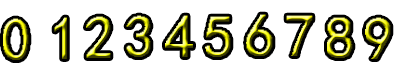
<style>
.page{position:relative;width:400px;height:80px;background:#ffffff}
.page>*{position:absolute;margin:0}
.t1{font:60px "¿¬Ìå"}
</style>
<div class="page">
<p class="t1" style="left:54px;top:17px;width:13px;height:42px">1</p>
<p class="t1" style="left:165px;top:15px;width:28px;height:42px">4</p>
<p class="t1" style="left:205px;top:16px;width:26px;height:41px">5</p>
<p class="t1" style="left:246px;top:14px;width:27px;height:42px">6</p>
<p class="t1" style="left:286px;top:15px;width:27px;height:41px">7</p>
<p class="t1" style="left:327px;top:17px;width:26px;height:41px">8</p>
<p class="t1" style="left:365px;top:17px;width:26px;height:42px">9</p>
<p class="t1" style="left:3px;top:18px;width:26px;height:42px">0</p>
</div>
